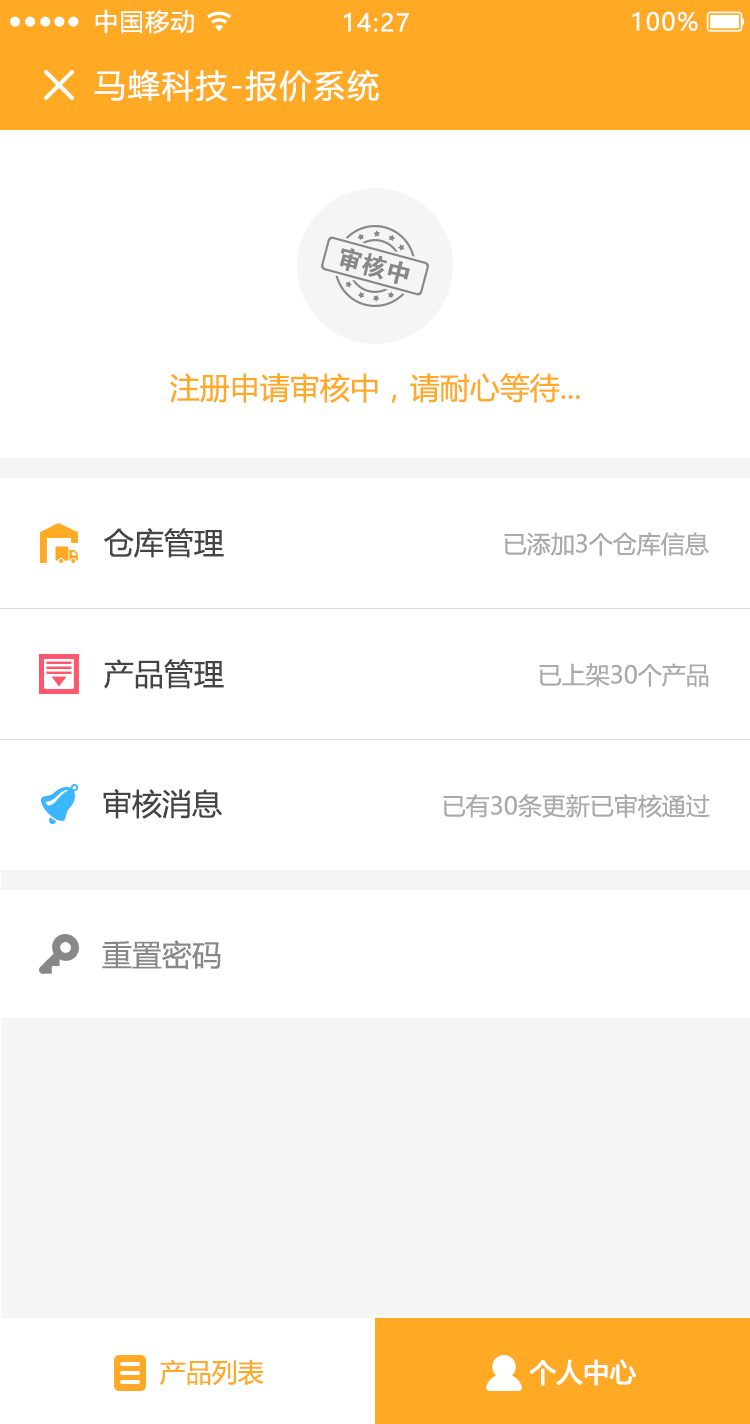
<style>
.page{position:relative;width:750px;height:1424px;background:#ffffff}
.page>*{position:absolute;margin:0}
.t1{font:24px "MicrosoftYaHeiUI";letter-spacing:0.06em;color:#ffffff}
.t2{font:32px "MicrosoftYaHeiUI";letter-spacing:0.06em;color:#ffffff}
.t3{font:30px "MicrosoftYaHeiUI";color:#ffa924}
.t4{font:30px "MicrosoftYaHeiUI";color:#444444}
.t5{font:24px "MicrosoftYaHeiUI";color:#aaaaaa}
.t6{font:30px "MicrosoftYaHeiUI";color:#888888}
.t7{font:26px "MicrosoftYaHeiUI";color:#ffa924}
.t8{font:26px "MicrosoftYaHeiUI";color:#ffffff;font-weight:bold}
</style>
<div class="page">
<p class="t1" style="left:95px;top:9px;width:99px;height:25px">中国移动</p>
<p class="t1" style="left:344px;top:12px;width:65px;height:20px">14:27</p>
<p class="t1" style="left:632px;top:11px;width:66px;height:20px">100%</p>
<p class="t2" style="left:94px;top:69px;width:285px;height:33px">马蜂科技-报价系统</p>
<p class="t3" style="left:170px;top:373px;width:410px;height:30px">注册申请审核中，请耐心等待...</p>
<p class="t4" style="left:104px;top:528px;width:120px;height:30px">仓库管理</p>
<p class="t5" style="left:504px;top:532px;width:205px;height:24px">已添加3个仓库信息</p>
<p class="t4" style="left:104px;top:659px;width:120px;height:30px">产品管理</p>
<p class="t5" style="left:539px;top:663px;width:170px;height:24px">已上架30个产品</p>
<p class="t4" style="left:103px;top:789px;width:119px;height:30px">审核消息</p>
<p class="t5" style="left:443px;top:794px;width:267px;height:24px">已有30条更新已审核通过</p>
<p class="t6" style="left:102px;top:940px;width:119px;height:30px">重置密码</p>
<p class="t7" style="left:160px;top:1359px;width:104px;height:27px">产品列表</p>
<p class="t8" style="left:529px;top:1359px;width:108px;height:27px">个人中心</p>
</div>
